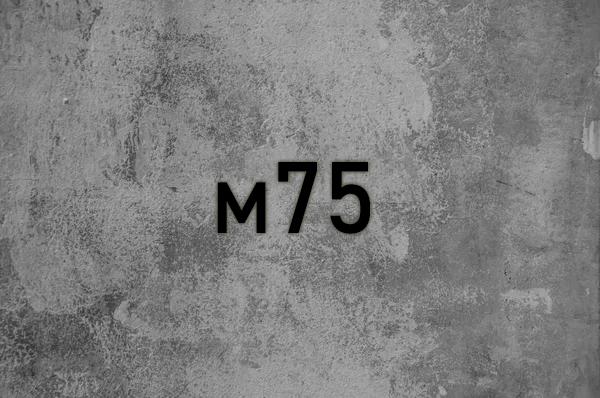
<style>
.page{position:relative;width:600px;height:398px}
.page>*{position:absolute;margin:0}
.t1{font:100px "Bahnschrift";color:#000000}
</style>
<div class="page">
<p class="t1" style="left:217px;top:162px;width:153px;height:72px">м75</p>
</div>
